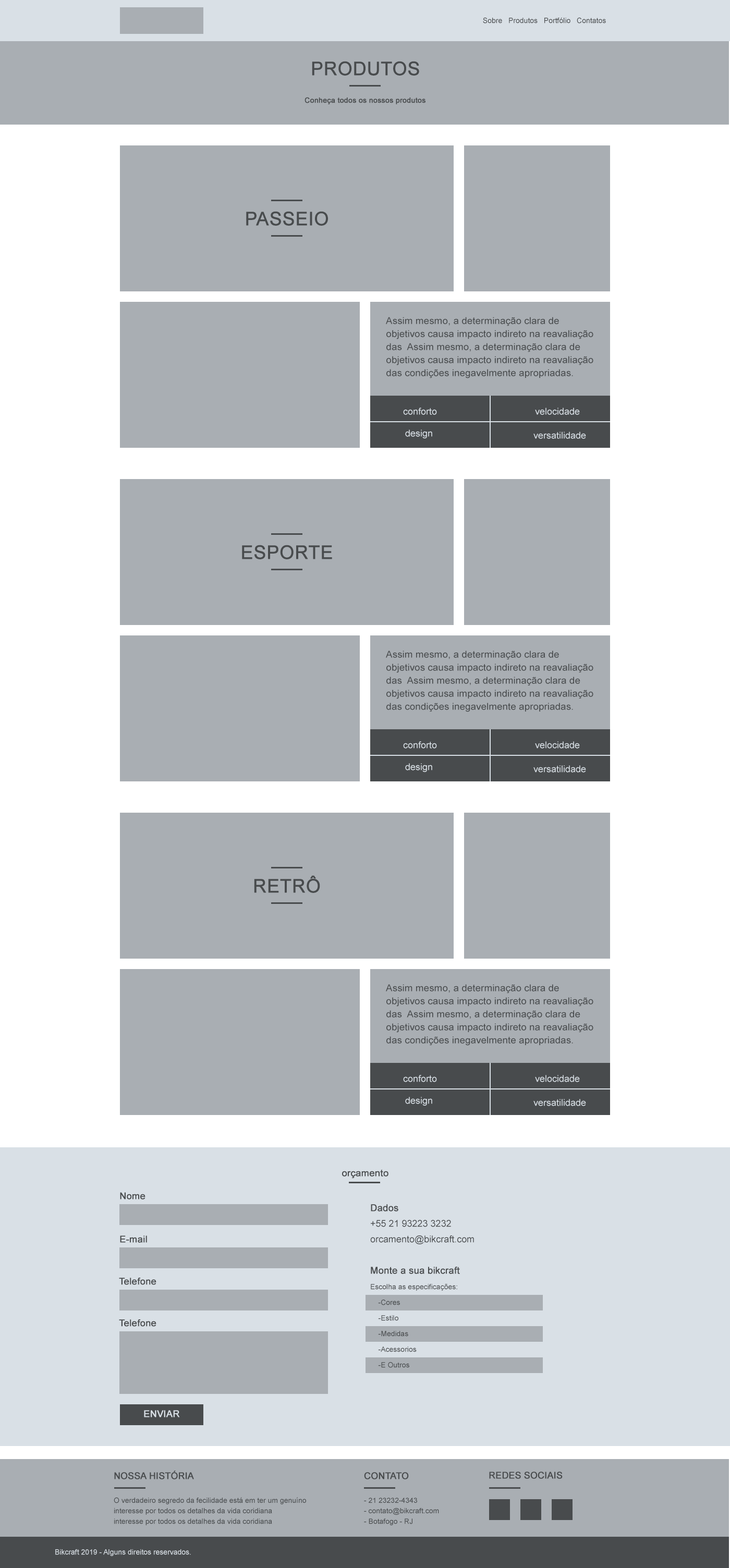
<style>
.page{position:relative;width:730px;height:1568px;background:#a9aeb3}
.page>*{position:absolute;margin:0}
.t1{font:7.5px "ArialMT";color:#484b4d}
.t2{font:18.8px "ArialMT";color:#484b4d;text-transform:uppercase;font-weight:bold}
.t3{font:7.3px "ArialMT";color:#484b4d;font-weight:bold}
.t4{font:9.4px/13px "ArialMT";color:#484b4d;scale:1.05 1}
.t5{font:9.3px "ArialMT";color:#d9e0e6}
.t6{font:9.3px "ArialMT";color:#484b4d;font-weight:bold}
.t7{font:7.3px/15.6px "ArialMT";color:#484b4d}
.t8{font:9.4px/15.6px "ArialMT";color:#484b4d;font-weight:bold}
.t9{font:9.4px/15.6px "ArialMT";color:#484b4d}
.t10{font:9.3px "ArialMT";color:#d9e0e6;font-weight:bold}
.t11{font:9.3px "ArialMT";color:#484b4d;text-transform:uppercase;font-weight:bold}
.t12{font:7.3px/10.4px "ArialMT";color:#484b4d}
.t13{font:7.5px "ArialMT";color:#d9e0e6}
</style>
<div class="page">
<p class="t1" style="left:483px;top:17px;width:123px;height:6px">Sobre   Produtos   Portfólio   Contatos</p>
<p class="t2" style="left:312px;top:61px;width:107px;height:15px">produtos</p>
<p class="t3" style="left:304px;top:97px;width:121px;height:7px">Conheça todos os nossos produtos</p>
<p class="t2" style="left:246px;top:211px;width:82px;height:15px">passeio</p>
<p class="t4" style="left:386px;top:317px;width:207px;height:61px">Assim mesmo, a determinação clara de objetivos causa impacto indireto na reavaliação das  Assim mesmo, a determinação clara de objetivos causa impacto indireto na reavaliação das condições inegavelmente apropriadas.</p>
<p class="t5" style="left:403px;top:408px;width:34px;height:7px">conforto</p>
<p class="t5" style="left:535px;top:408px;width:45px;height:7px">velocidade</p>
<p class="t5" style="left:405px;top:430px;width:27px;height:8px">design</p>
<p class="t5" style="left:533px;top:432px;width:53px;height:7px">versatilidade</p>
<p class="t2" style="left:242px;top:545px;width:90px;height:14px">ESPORTE</p>
<p class="t4" style="left:386px;top:651px;width:207px;height:61px">Assim mesmo, a determinação clara de objetivos causa impacto indireto na reavaliação das  Assim mesmo, a determinação clara de objetivos causa impacto indireto na reavaliação das condições inegavelmente apropriadas.</p>
<p class="t5" style="left:403px;top:741px;width:34px;height:8px">conforto</p>
<p class="t5" style="left:535px;top:741px;width:45px;height:8px">velocidade</p>
<p class="t5" style="left:405px;top:763px;width:27px;height:9px">design</p>
<p class="t5" style="left:533px;top:765px;width:53px;height:8px">versatilidade</p>
<p class="t2" style="left:254px;top:875px;width:66px;height:18px">RETRÔ</p>
<p class="t4" style="left:386px;top:984px;width:207px;height:62px">Assim mesmo, a determinação clara de objetivos causa impacto indireto na reavaliação das  Assim mesmo, a determinação clara de objetivos causa impacto indireto na reavaliação das condições inegavelmente apropriadas.</p>
<p class="t5" style="left:403px;top:1075px;width:34px;height:7px">conforto</p>
<p class="t5" style="left:535px;top:1075px;width:45px;height:7px">velocidade</p>
<p class="t5" style="left:405px;top:1097px;width:27px;height:9px">design</p>
<p class="t5" style="left:533px;top:1099px;width:53px;height:7px">versatilidade</p>
<p class="t6" style="left:342px;top:1169px;width:46px;height:9px">orçamento</p>
<p class="t6" style="left:120px;top:1192px;width:25px;height:7px">Nome</p>
<p class="t7" style="left:370px;top:1204px;width:104px;height:164px"><span class="t8">Dados<br></span><span class="t9">+55 21 93223 3232<br>orcamento@bikcraft.com<br><br></span><span class="t8">Monte a sua bikcraft<br></span>Escolha as especificações:<br>    -Cores<br>    -Estilo<br>    -Medidas<br>    -Acessorios<br>    -E Outros</p>
<p class="t6" style="left:120px;top:1235px;width:27px;height:8px">E-mail</p>
<p class="t6" style="left:119px;top:1278px;width:37px;height:7px">Telefone</p>
<p class="t6" style="left:119px;top:1319px;width:37px;height:8px">Telefone</p>
<p class="t10" style="left:144px;top:1410px;width:36px;height:7px">ENVIAR</p>
<p class="t11" style="left:114px;top:1471px;width:80px;height:8px">Nossa História</p>
<p class="t11" style="left:364px;top:1472px;width:45px;height:7px">contato</p>
<p class="t11" style="left:489px;top:1472px;width:73px;height:7px">redes sociais</p>
<p class="t12" style="left:114px;top:1497px;width:192px;height:28px">O verdadeiro segredo da fecilidade está em ter um genuíno interesse por todos os detalhes da vida coridiana<br>interesse por todos os detalhes da vida coridiana</p>
<p class="t12" style="left:364px;top:1498px;width:75px;height:27px">- 21 23232-4343<br>- contato@bikcraft.com<br>- Botafogo - RJ</p>
<p class="t13" style="left:55px;top:1549px;width:136px;height:7px">Bikcraft 2019 - Alguns direitos reservados.</p>
</div>
